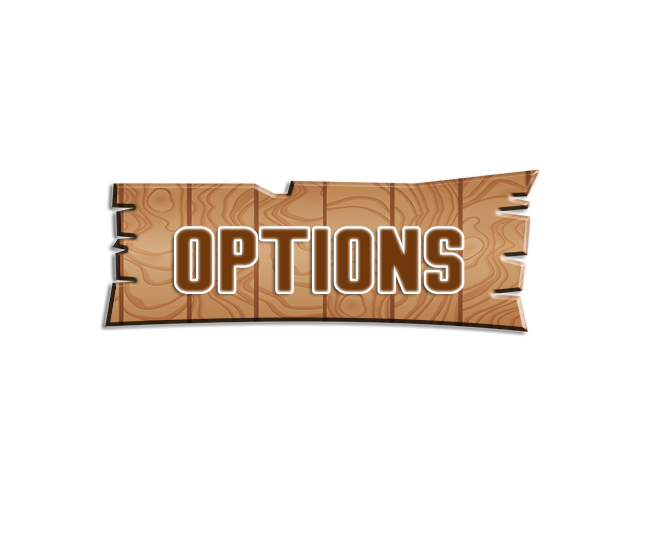
<style>
.page{position:relative;width:650px;height:536px;background:#ffffff}
.page>*{position:absolute;margin:0}
.t1{font:70px "BrewmasterGothicRound";color:#70380b;scale:1.26 1}
</style>
<div class="page">
<p class="t1" style="left:176px;top:228px;width:287px;height:64px">options</p>
</div>
